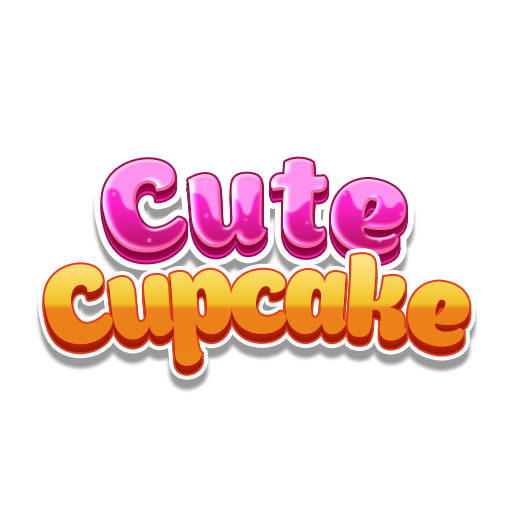
<style>
.page{position:relative;width:512px;height:512px;background:#ffffff}
.page>*{position:absolute;margin:0}
.t1{font:145.5px "Boomboom"}
.t2{font:124.7px "Boomboom";letter-spacing:-0.04em}
</style>
<div class="page">
<p class="t1" style="left:102px;top:158px;width:304px;height:97px">Cute</p>
<p class="t2" style="left:44px;top:254px;width:426px;height:112px">Cupcake</p>
</div>
